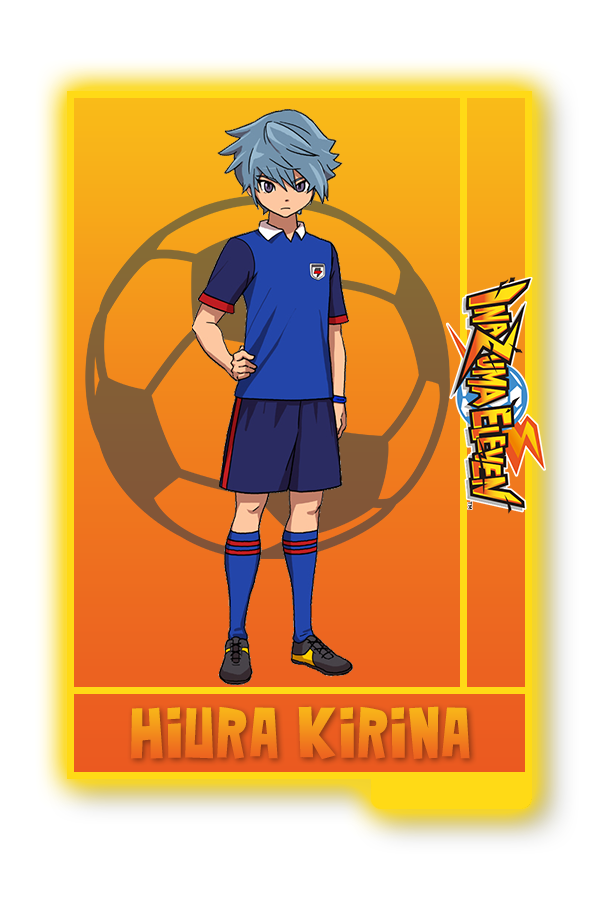
<style>
.page{position:relative;width:600px;height:900px;background:#ffffff}
.page>*{position:absolute;margin:0}
.t1{font:75px "TTG-Bold"}
</style>
<div class="page">
<p class="t1" style="left:131px;top:706px;width:339px;height:54px">Hiura Kirina</p>
</div>
